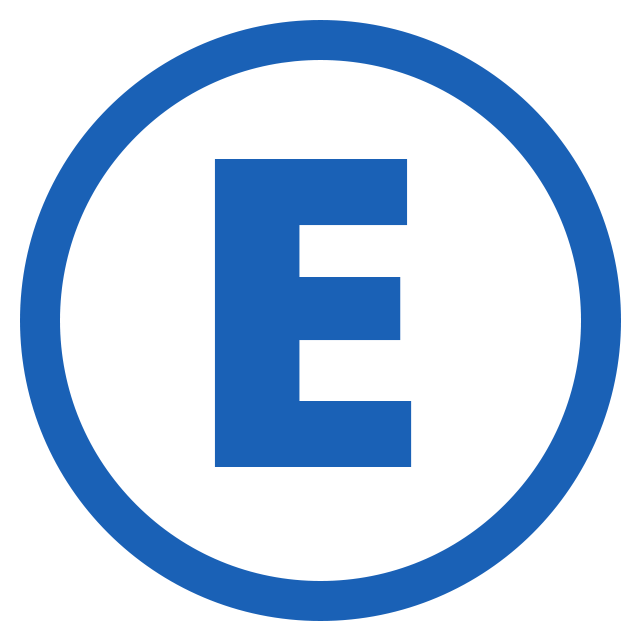
<style>
.page{position:relative;width:640px;height:640px;background:#ffffff}
.page>*{position:absolute;margin:0}
.t1{font:431.8px "HelveticaNeue-CondensedBlack";letter-spacing:0.05em;color:#1a61b6;scale:1.05 1}
</style>
<div class="page">
<p class="t1" style="left:214px;top:159px;width:198px;height:308px">E</p>
</div>
